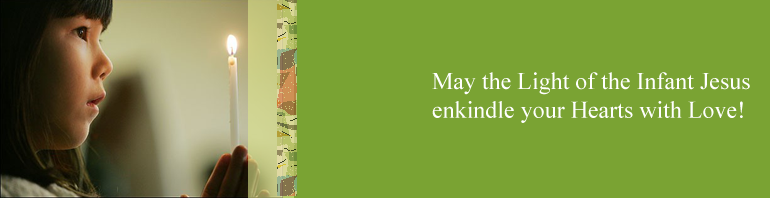
<style>
.page{position:relative;width:770px;height:198px;background:#7aa333}
.page>*{position:absolute;margin:0}
.t1{font:24px "TimesNewRomanPSMT";color:#ffffff}
</style>
<div class="page">
<p class="t1" style="left:432px;top:72px;width:318px;height:51px">May the Light of the Infant Jesus <br>enkindle your Hearts with Love!</p>
</div>
